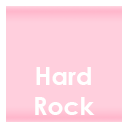
<style>
.page{position:relative;width:128px;height:128px;background:#ffcfdd}
.page>*{position:absolute;margin:0}
.t1{font:25px "CenturyGothic-Bold";color:#ffffff}
</style>
<div class="page">
<p class="t1" style="left:35px;top:67px;width:60px;height:48px;text-align:center">Hard<br>Rock</p>
</div>
